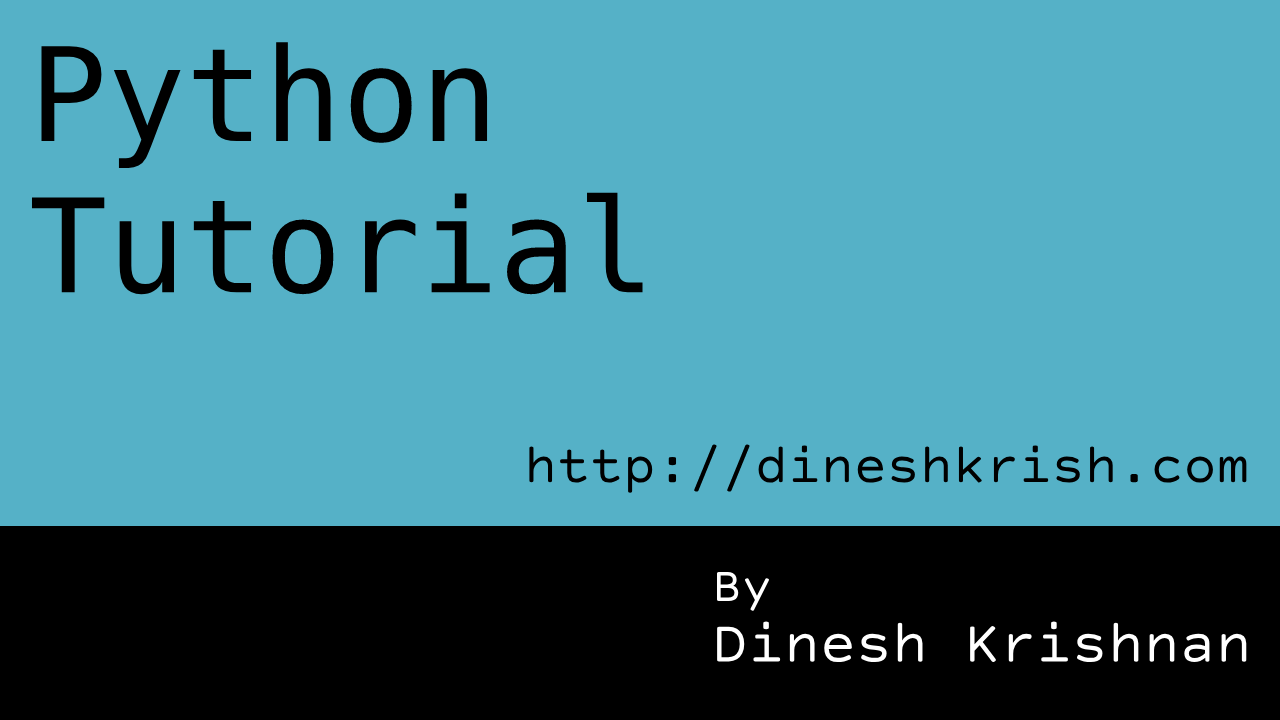
<style>
.page{position:relative;width:1280px;height:720px;background:#55b1c7}
.page>*{position:absolute;margin:0}
.t1{font:130px "DejaVuSansMono";color:#000000}
.t2{font:55px "CourierPrimeSans-Regular";color:#000000}
.t3{font:60px "CourierPrimeSans-Regular";color:#ffffff}
.t4{font:50px "CourierPrimeSans-Regular";color:#ffffff}
</style>
<div class="page">
<p class="t1" style="left:31px;top:42px;width:612px;height:253px">Python <br>Tutorial</p>
<p class="t2" style="left:529px;top:444px;width:718px;height:49px">http://dineshkrish.com</p>
<p class="t3" style="left:717px;top:572px;width:530px;height:91px"><span class="t4">By<br></span>Dinesh Krishnan</p>
</div>
